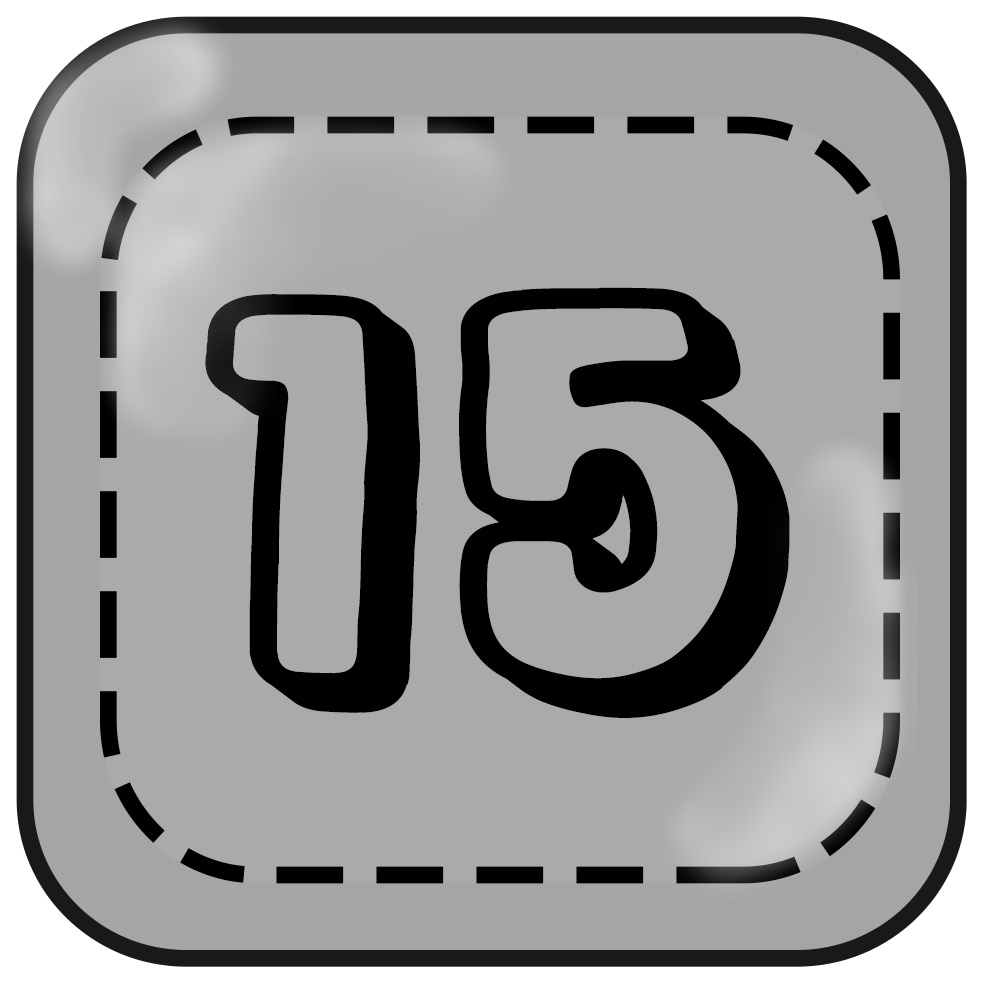
<style>
.page{position:relative;width:1000px;height:1000px;background:#aaaaaa}
.page>*{position:absolute;margin:0}
.t1{font:406.5px "SugarpunchDEMO";letter-spacing:0.1em;color:#000000;scale:1.33 1}
</style>
<div class="page">
<p class="t1" style="left:205px;top:287px;width:585px;height:431px">15</p>
</div>
